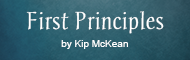
<style>
.page{position:relative;width:190px;height:60px}
.page>*{position:absolute;margin:0}
.t1{font:20px "Chantelli-Antiqua";color:#ffffff}
.t2{font:10px "ArialMT";color:#ffffff}
</style>
<div class="page">
<p class="t1" style="left:26px;top:11px;width:138px;height:23px">First Principles</p>
<p class="t2" style="left:61px;top:40px;width:67px;height:9px">by Kip McKean</p>
</div>
